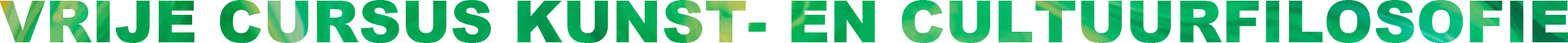
<style>
.page{position:relative;width:1568px;height:43px;background:#ffffff}
.page>*{position:absolute;margin:0}
.t1{font:59.3px "Arial-Black"}
</style>
<div class="page">
<p class="t1" style="left:0px;top:0px;width:1569px;height:43px">VRIJE CURSUS KUNST- EN CULTUURFILOSOFIE</p>
</div>
